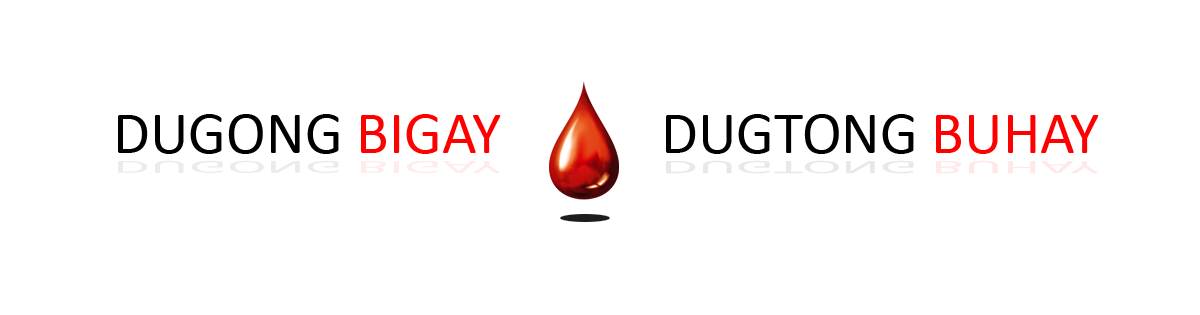
<style>
.page{position:relative;width:1200px;height:315px;background:#ffffff}
.page>*{position:absolute;margin:0}
.t1{font:60px "Calibri";color:#000000}
.t2{font:60px "Calibri";color:#ff0000}
.t3{font:60px "Calibri";color:#fe0000}
.t4{font:18.8px "Calibri";color:#ebebeb;scale:3.19 1}
.t5{font:19.2px "Calibri";scale:3.12 1}
</style>
<div class="page">
<p class="t1" style="left:118px;top:114px;width:383px;height:40px">DUGONG <span class="t2">BIGAY</span></p>
<p class="t1" style="left:666px;top:114px;width:433px;height:40px">DUGTONG <span class="t3">BUHAY</span></p>
<p class="t4" style="left:118px;top:160px;width:383px;height:13px">DUGONG BIGAY</p>
<p class="t5" style="left:666px;top:160px;width:433px;height:14px">DUGTONG BUHAY</p>
</div>
